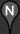
<style>
.page{position:relative;width:20px;height:34px;background:#333333}
.page>*{position:absolute;margin:0}
.t1{font:13px "ArialMT";color:#ffffff}
</style>
<div class="page">
<p class="t1" style="left:5px;top:5px;width:9px;height:11px">N</p>
</div>
